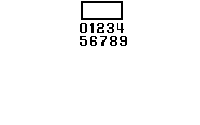
<style>
.page{position:relative;width:200px;height:125px;background:#ffffff}
.page>*{position:absolute;margin:0}
.t1{font:15.4px "PixelDigivolve";letter-spacing:0.01em;color:#000000;scale:0.8 1}
</style>
<div class="page">
<p class="t1" style="left:80px;top:23px;width:7px;height:10px">0</p>
<p class="t1" style="left:90px;top:23px;width:4px;height:10px">1</p>
<p class="t1" style="left:97px;top:23px;width:7px;height:10px">2</p>
<p class="t1" style="left:107px;top:23px;width:7px;height:10px">3</p>
<p class="t1" style="left:117px;top:23px;width:7px;height:10px">4</p>
<p class="t1" style="left:80px;top:36px;width:7px;height:10px">5</p>
<p class="t1" style="left:90px;top:36px;width:7px;height:10px">6</p>
<p class="t1" style="left:100px;top:36px;width:7px;height:10px">7</p>
<p class="t1" style="left:110px;top:36px;width:7px;height:10px">8</p>
<p class="t1" style="left:120px;top:36px;width:7px;height:10px">9</p>
</div>
